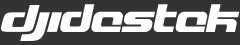
<style>
.page{position:relative;width:240px;height:45px;background:#333333}
.page>*{position:absolute;margin:0}
.t1{font:48px "Blaster-Italic";letter-spacing:-0.04em;color:#ffffff}
</style>
<div class="page">
<p class="t1" style="left:60px;top:4px;width:180px;height:28px">destek</p>
</div>
